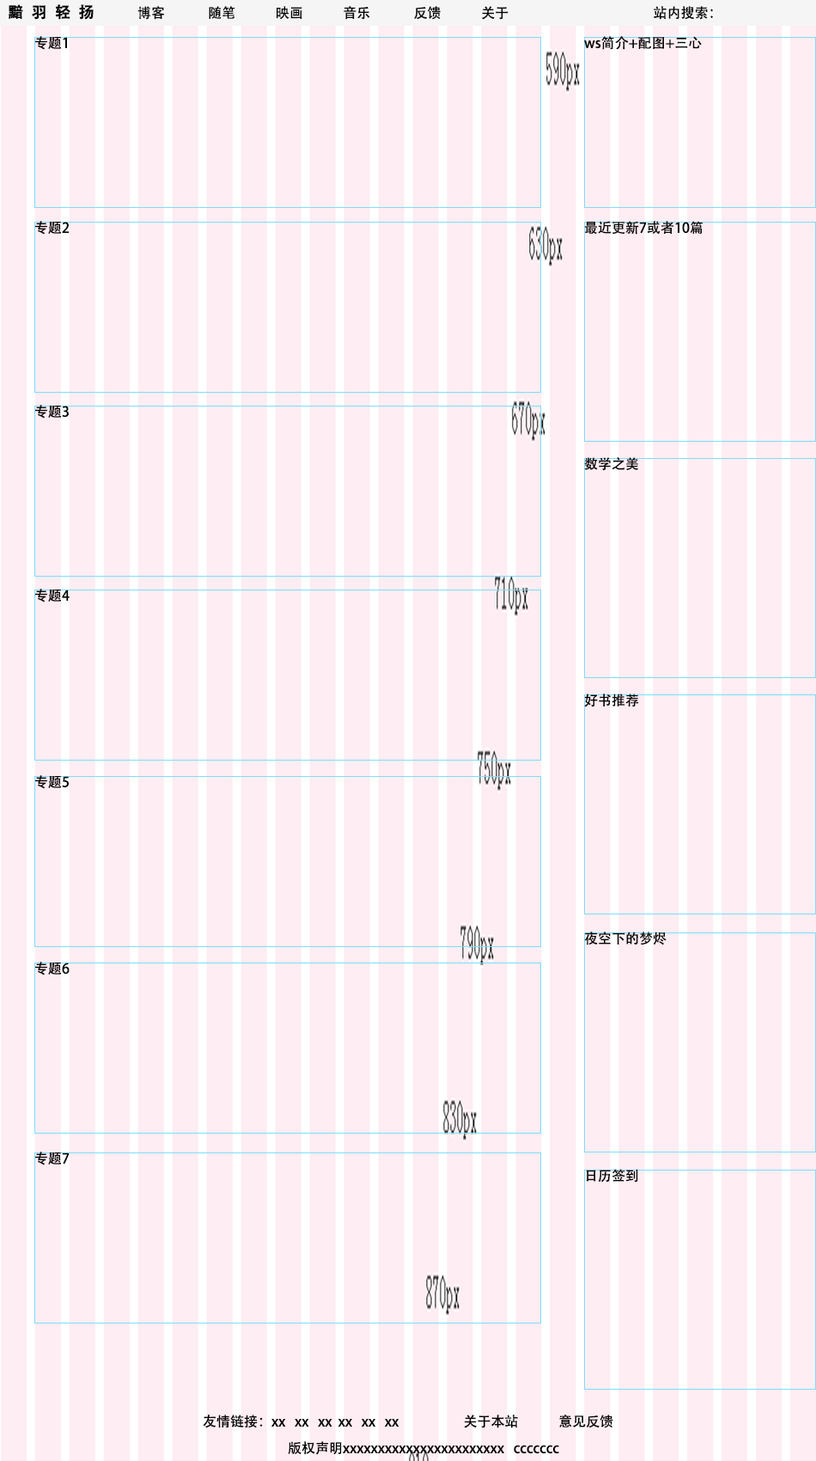
<style>
.page{position:relative;width:816px;height:1461px;background:#feedf2}
.page>*{position:absolute;margin:0}
.t1{font:15.5px "AdobeHeitiStd-Regular";color:#030303;font-weight:bold}
.t2{font:13.7px "AdobeHeitiStd-Regular";color:#030303}
</style>
<div class="page">
<p class="t1" style="left:9px;top:4px;width:85px;height:16px">黯  羽  轻  扬</p>
<p class="t2" style="left:137px;top:6px;width:576px;height:14px">博客              随笔             映画             音乐              反馈             关于                                               站内搜索：</p>
<p class="t2" style="left:35px;top:36px;width:32px;height:14px">专题1</p>
<p class="t2" style="left:584px;top:36px;width:118px;height:14px">ws简介+配图+三心</p>
<p class="t2" style="left:35px;top:221px;width:35px;height:14px">专题2</p>
<p class="t2" style="left:585px;top:221px;width:118px;height:14px">最近更新7或者10篇</p>
<p class="t2" style="left:35px;top:405px;width:34px;height:13px">专题3</p>
<p class="t2" style="left:584px;top:457px;width:54px;height:14px">数学之美</p>
<p class="t2" style="left:35px;top:589px;width:35px;height:13px">专题4</p>
<p class="t2" style="left:584px;top:693px;width:54px;height:14px">好书推荐</p>
<p class="t2" style="left:35px;top:775px;width:34px;height:14px">专题5</p>
<p class="t2" style="left:584px;top:931px;width:83px;height:14px">夜空下的梦烬</p>
<p class="t2" style="left:35px;top:962px;width:35px;height:13px">专题6</p>
<p class="t2" style="left:35px;top:1151px;width:35px;height:14px">专题7</p>
<p class="t2" style="left:587px;top:1169px;width:51px;height:13px">日历签到</p>
<p class="t2" style="left:203px;top:1414px;width:411px;height:14px">友情链接：xx   xx   xx  xx   xx   xx                     关于本站             意见反馈</p>
<p class="t2" style="left:288px;top:1441px;width:271px;height:14px">版权声明xxxxxxxxxxxxxxxxxxxxxxx   ccccccc</p>
</div>
